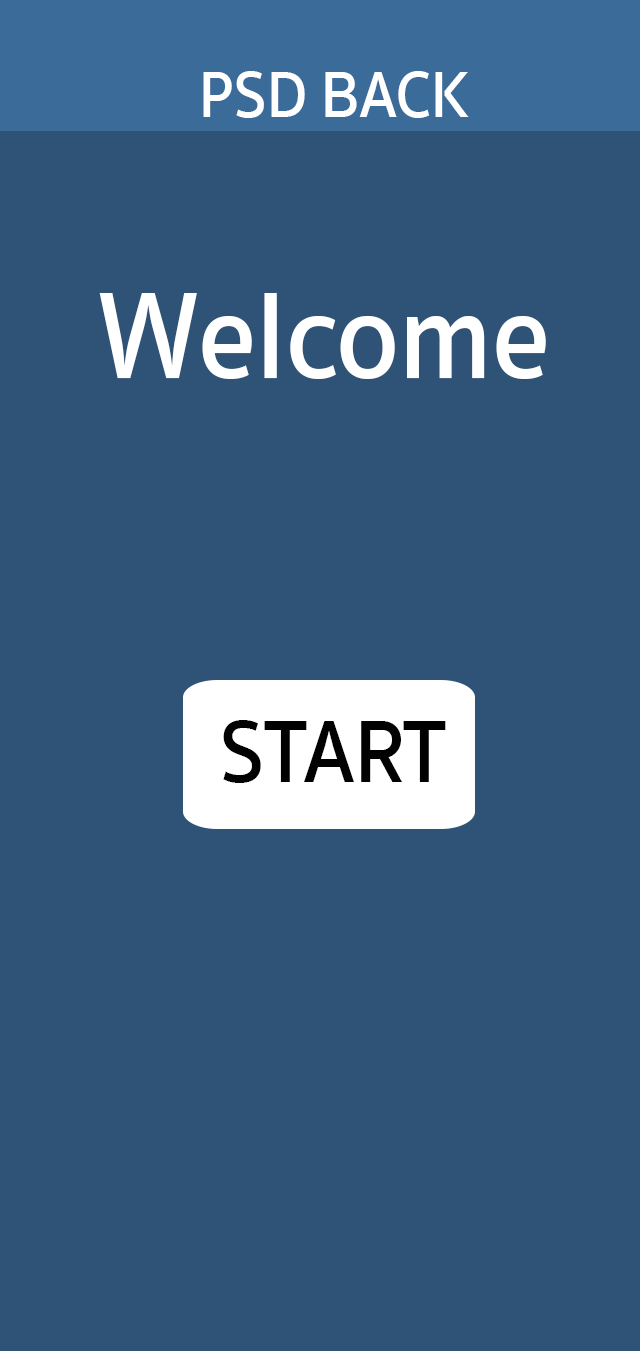
<style>
.page{position:relative;width:640px;height:1351px;background:#2e5376}
.page>*{position:absolute;margin:0}
.t1{font:66.6px "SukhumvitSet-SemiBold";color:#ffffff;scale:0.91 1}
.t2{font:125.8px "SukhumvitSet-SemiBold";color:#ffffff;scale:0.91 1}
.t3{font:90.7px "SukhumvitSet-SemiBold";color:#010101;scale:0.91 1}
</style>
<div class="page">
<p class="t1" style="left:203px;top:71px;width:266px;height:47px">PSD BACK</p>
<p class="t2" style="left:99px;top:293px;width:447px;height:86px">Welcome</p>
<p class="t3" style="left:223px;top:720px;width:223px;height:63px">START</p>
</div>
